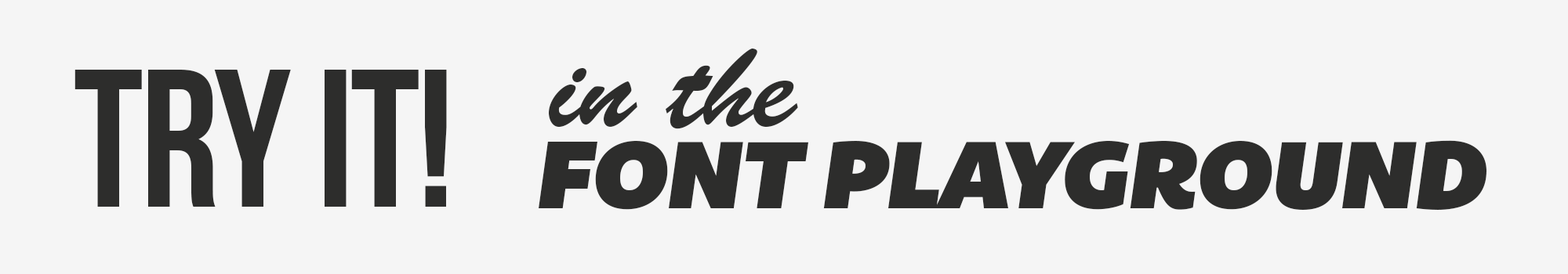
<style>
.page{position:relative;width:1568px;height:274px;background:#f5f5f5}
.page>*{position:absolute;margin:0}
.t1{font:117.6px "BrushScriptStd";letter-spacing:-0.015em;color:#2d2d2c}
.t2{font:196px "BebasNeue";letter-spacing:-0.015em;color:#2d2d2c}
.t3{font:98px "BemioItalic";letter-spacing:-0.015em;color:#2d2d2c}
</style>
<div class="page">
<p class="t1" style="left:549px;top:49px;width:249px;height:80px">in the</p>
<p class="t2" style="left:74px;top:70px;width:373px;height:137px">Try It!</p>
<p class="t3" style="left:539px;top:140px;width:947px;height:70px">FONT PLAYGROUND</p>
</div>
